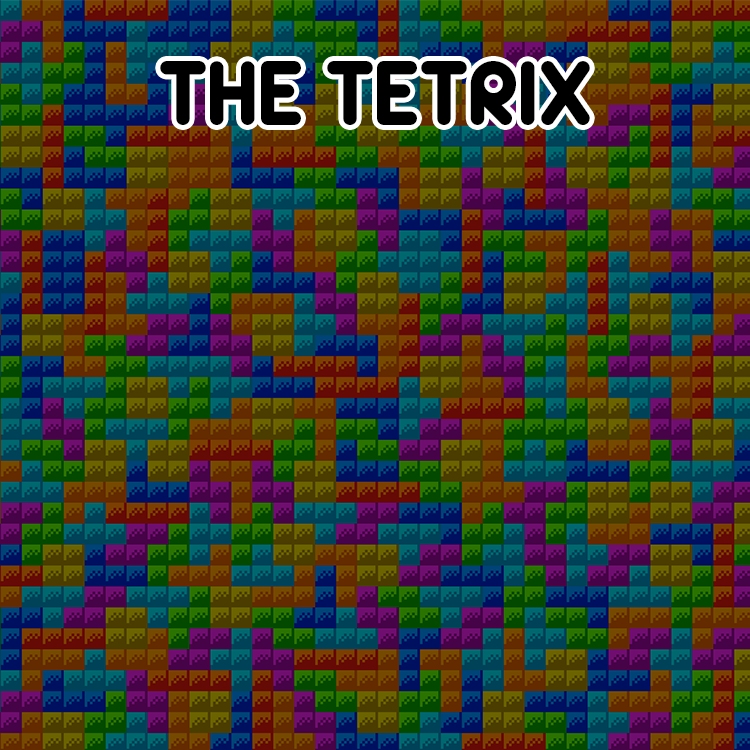
<style>
.page{position:relative;width:750px;height:750px}
.page>*{position:absolute;margin:0}
.t1{font:100px "zArista";color:#000000;text-transform:uppercase}
</style>
<div class="page">
<p class="t1" style="left:160px;top:61px;width:430px;height:64px">THE TETRIX</p>
</div>
